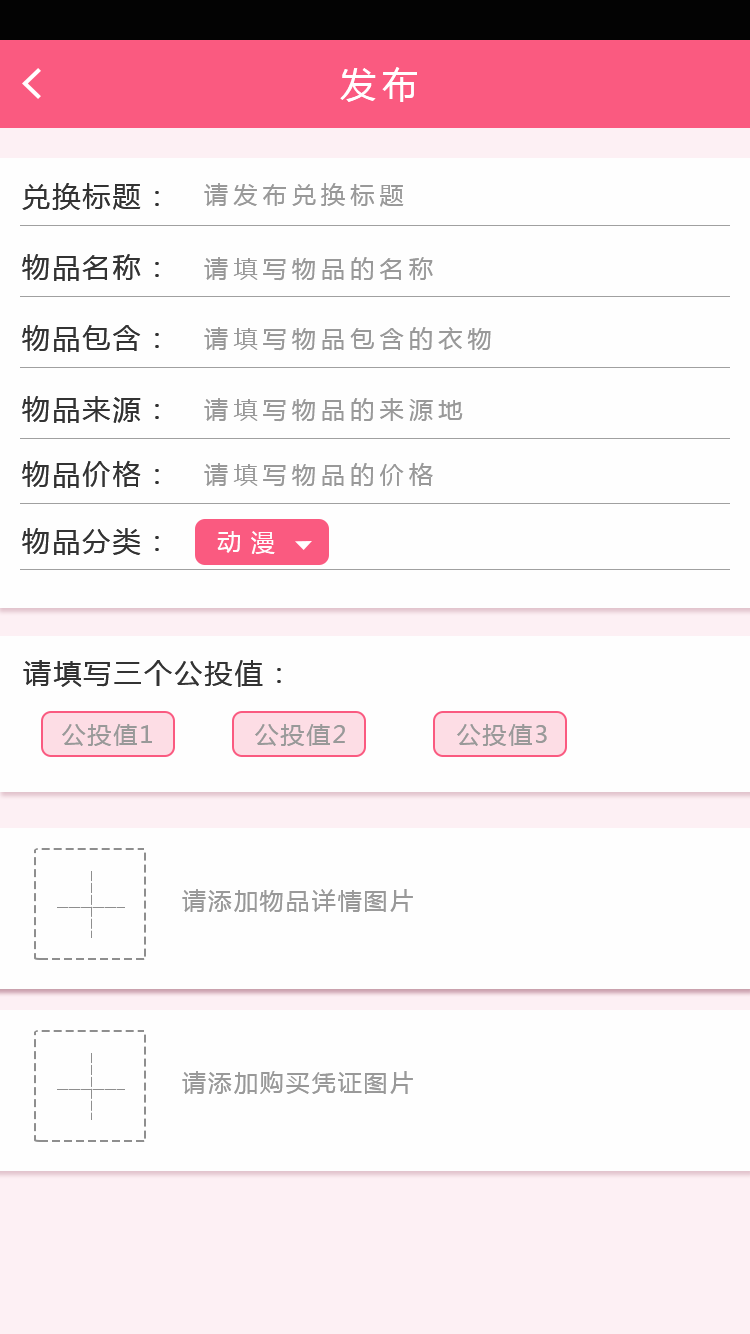
<style>
.page{position:relative;width:750px;height:1334px;background:#fefefe}
.page>*{position:absolute;margin:0}
.t1{font:36px "MicrosoftYaHei";letter-spacing:0.16em;color:#ffffff}
.t2{font:28px "MicrosoftYaHei";letter-spacing:0.08em;color:#333333}
.t3{font:24px "MicrosoftYaHei";letter-spacing:0.22em;color:#999999}
.t4{font:24px "MicrosoftYaHei";letter-spacing:0.4em;color:#fefdfd}
.t5{font:24px "MicrosoftYaHei";letter-spacing:0.08em;color:#999999}
.t6{font:24px "MicrosoftYaHei";letter-spacing:0.08em}
</style>
<div class="page">
<p class="t1" style="left:340px;top:67px;width:77px;height:35px">发布</p>
<p class="t2" style="left:22px;top:183px;width:137px;height:27px">兑换标题：</p>
<p class="t3" style="left:204px;top:183px;width:200px;height:24px">请发布兑换标题</p>
<p class="t2" style="left:22px;top:254px;width:137px;height:27px">物品名称：</p>
<p class="t3" style="left:204px;top:257px;width:229px;height:24px">请填写物品的名称</p>
<p class="t2" style="left:22px;top:325px;width:137px;height:27px">物品包含：</p>
<p class="t3" style="left:204px;top:327px;width:287px;height:24px">请填写物品包含的衣物</p>
<p class="t2" style="left:22px;top:396px;width:137px;height:27px">物品来源：</p>
<p class="t3" style="left:204px;top:398px;width:259px;height:24px">请填写物品的来源地</p>
<p class="t2" style="left:22px;top:460px;width:137px;height:28px">物品价格：</p>
<p class="t3" style="left:204px;top:462px;width:229px;height:25px">请填写物品的价格</p>
<p class="t2" style="left:22px;top:528px;width:137px;height:27px">物品分类：</p>
<p class="t4" style="left:217px;top:531px;width:58px;height:23px">动漫</p>
<p class="t2" style="left:23px;top:660px;width:258px;height:27px">请填写三个公投值：</p>
<p class="t5" style="left:62px;top:724px;width:90px;height:22px">公投值1</p>
<p class="t5" style="left:255px;top:724px;width:90px;height:22px">公投值2</p>
<p class="t5" style="left:457px;top:724px;width:90px;height:22px">公投值3</p>
<p class="t6" style="left:182px;top:889px;width:386px;height:23px">请添加购买凭证图片及物品详情图</p>
<p class="t5" style="left:182px;top:889px;width:231px;height:23px">请添加物品详情图片</p>
<p class="t5" style="left:182px;top:1071px;width:231px;height:23px">请添加购买凭证图片</p>
</div>
